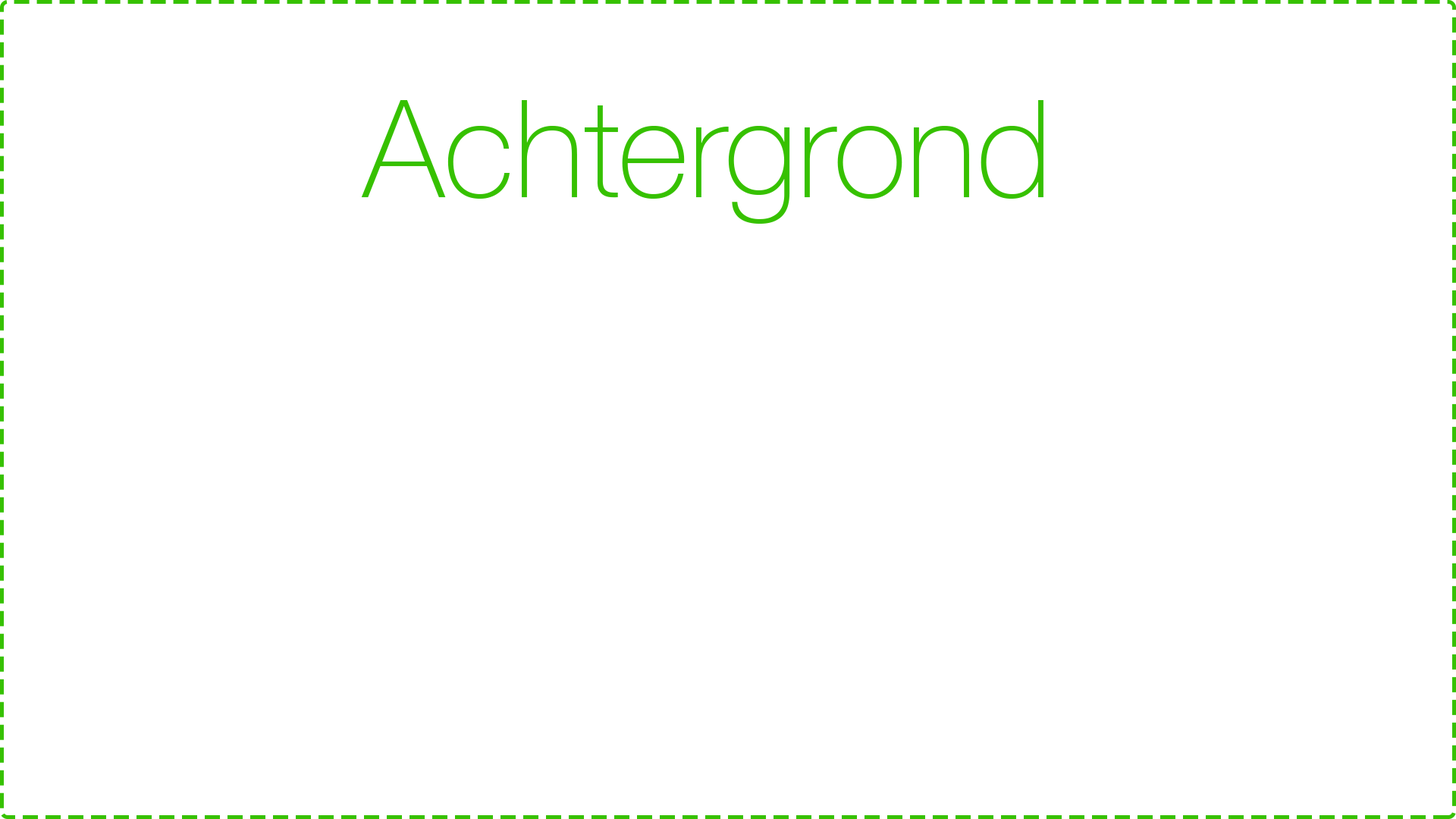
<style>
.page{position:relative;width:1456px;height:819px;background:#ffffff}
.page>*{position:absolute;margin:0}
.t1{font:135.7px "HelveticaNeue-Thin";color:#36c100}
</style>
<div class="page">
<p class="t1" style="left:361px;top:100px;width:682px;height:124px">Achtergrond</p>
</div>
